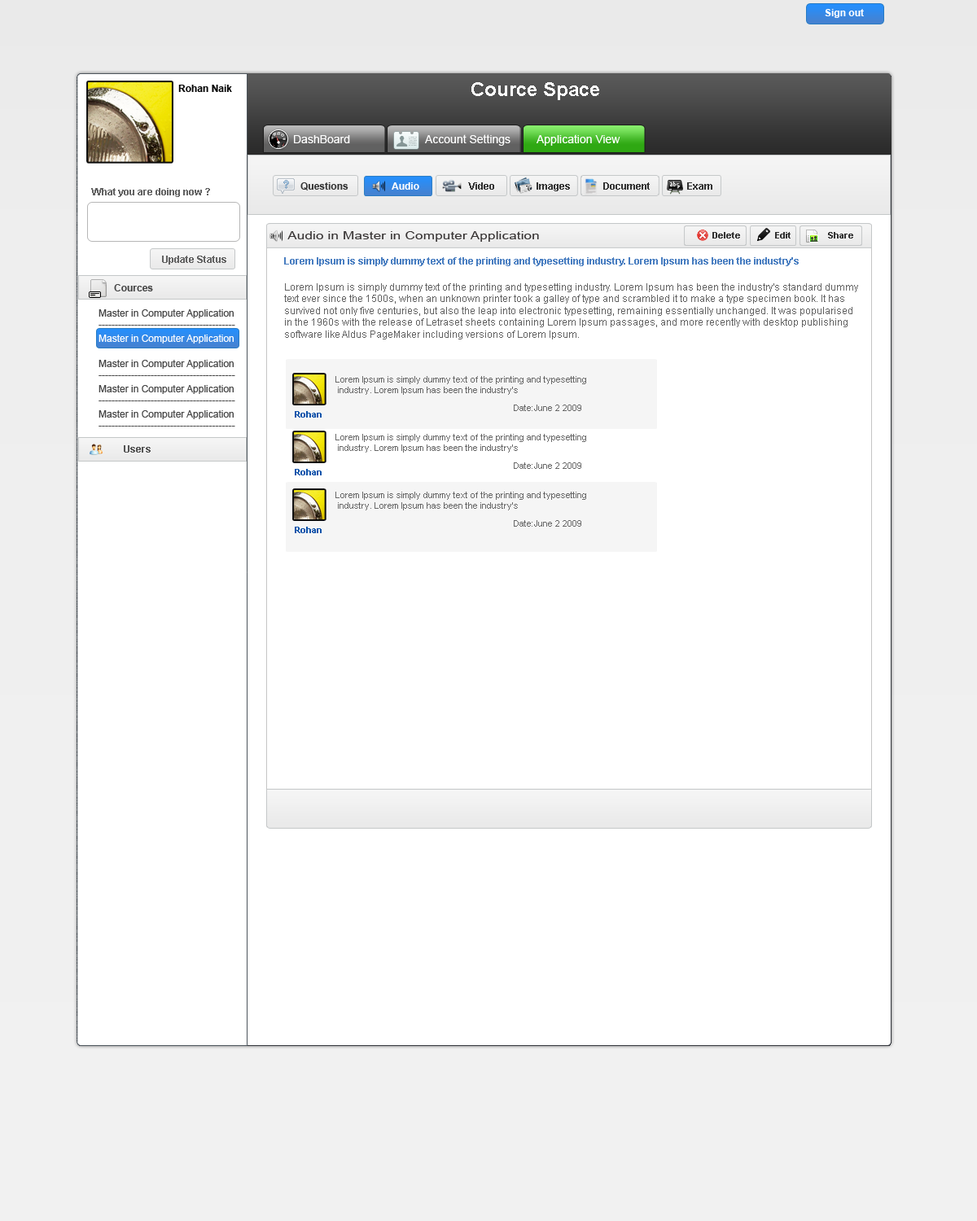
<style>
.page{position:relative;width:977px;height:1221px;background:#ffffff}
.page>*{position:absolute;margin:0}
.t1{font:9.8px "Arial-BoldMT";color:#ffffff}
.t2{font:9.8px "Arial-BoldMT";color:#060606}
.t3{font:19.5px "Arial-BoldMT";color:#ffffff}
.t4{font:11.4px "ArialMT";color:#ffffff}
.t5{font:9.8px "Arial-BoldMT";color:#323232}
.t6{font:9.8px "Arial-BoldMT";color:#626262}
.t7{font:11.4px "ArialMT";color:#373333;scale:1.24 1}
.t8{font:9px "Arial-BoldMT";color:#323232}
.t9{font:9.8px "Arial-BoldMT";color:#497ec1}
.t10{font:9.8px "Arial-BoldMT";color:#464646}
.t11{font:9.8px "ArialMT";color:#626262}
.t12{font:9.8px "ArialMT";color:#464646}
.t13{font:9.8px "ArialMT";color:#ffffff}
.t14{font:9px "ArialMT";color:#686868}
.t15{font:9px "Arial-BoldMT";color:#1155ab}
.t16{font:9.8px "Arial-BoldMT";color:#545454}
</style>
<div class="page">
<p class="t1" style="left:824px;top:9px;width:40px;height:9px">Sign out</p>
<p class="t2" style="left:178px;top:85px;width:54px;height:7px">Rohan Naik</p>
<p class="t3" style="left:471px;top:82px;width:128px;height:18px">Cource Space</p>
<p class="t4" style="left:294px;top:135px;width:56px;height:8px">DashBoard</p>
<p class="t4" style="left:425px;top:134px;width:85px;height:12px">Account Settings</p>
<p class="t4" style="left:536px;top:134px;width:84px;height:12px">Application View</p>
<p class="t5" style="left:300px;top:182px;width:48px;height:8px">Questions</p>
<p class="t1" style="left:391px;top:182px;width:28px;height:8px">Audio</p>
<p class="t5" style="left:468px;top:182px;width:26px;height:8px">Video</p>
<p class="t5" style="left:536px;top:182px;width:34px;height:9px">Images</p>
<p class="t5" style="left:603px;top:182px;width:47px;height:8px">Document</p>
<p class="t5" style="left:687px;top:182px;width:25px;height:8px">Exam</p>
<p class="t6" style="left:91px;top:188px;width:119px;height:9px">What you are doing now ?</p>
<p class="t7" style="left:287px;top:231px;width:252px;height:11px">Audio in Master in Computer Application</p>
<p class="t8" style="left:712px;top:232px;width:28px;height:6px">Delete</p>
<p class="t8" style="left:775px;top:232px;width:15px;height:6px">Edit</p>
<p class="t8" style="left:828px;top:232px;width:25px;height:6px">Share</p>
<p class="t6" style="left:162px;top:256px;width:64px;height:9px">Update Status</p>
<p class="t9" style="left:284px;top:257px;width:514px;height:9px">Lorem Ipsum is simply dummy text of the printing and typesetting industry. Lorem Ipsum has been the industry's</p>
<p class="t10" style="left:114px;top:284px;width:39px;height:7px">Cources</p>
<p class="t11" style="left:284px;top:283px;width:574px;height:56px">Lorem Ipsum is simply dummy text of the printing and typesetting industry. Lorem Ipsum has been the industry's standard dummy <br>text ever since the 1500s, when an unknown printer took a galley of type and scrambled it to make a type specimen book. It has <br>survived not only five centuries, but also the leap into electronic typesetting, remaining essentially unchanged. It was popularised <br>in the 1960s with the release of Letraset sheets containing Lorem Ipsum passages, and more recently with desktop publishing <br>software like Aldus PageMaker including versions of Lorem Ipsum.</p>
<p class="t12" style="left:98px;top:309px;width:137px;height:17px">Master in Computer Application<br>------------------------------------------</p>
<p class="t13" style="left:98px;top:335px;width:137px;height:16px">Master in Computer Application<br>------------------------------------------</p>
<p class="t12" style="left:98px;top:360px;width:137px;height:16px">Master in Computer Application<br>------------------------------------------</p>
<p class="t14" style="left:335px;top:376px;width:251px;height:19px">Lorem Ipsum is simply dummy text of the printing and typesetting<br> industry. Lorem Ipsum has been the industry's</p>
<p class="t12" style="left:98px;top:385px;width:137px;height:16px">Master in Computer Application<br>------------------------------------------</p>
<p class="t12" style="left:98px;top:410px;width:137px;height:16px">Master in Computer Application<br>------------------------------------------</p>
<p class="t15" style="left:295px;top:411px;width:26px;height:7px">Rohan</p>
<p class="t14" style="left:514px;top:405px;width:67px;height:6px">Date:June 2 2009</p>
<p class="t14" style="left:335px;top:434px;width:251px;height:19px">Lorem Ipsum is simply dummy text of the printing and typesetting<br> industry. Lorem Ipsum has been the industry's</p>
<p class="t16" style="left:124px;top:445px;width:27px;height:8px">Users</p>
<p class="t15" style="left:295px;top:469px;width:26px;height:6px">Rohan</p>
<p class="t14" style="left:514px;top:462px;width:67px;height:7px">Date:June 2 2009</p>
<p class="t14" style="left:335px;top:492px;width:251px;height:18px">Lorem Ipsum is simply dummy text of the printing and typesetting<br> industry. Lorem Ipsum has been the industry's</p>
<p class="t14" style="left:514px;top:520px;width:67px;height:7px">Date:June 2 2009</p>
<p class="t15" style="left:295px;top:527px;width:26px;height:6px">Rohan</p>
</div>
